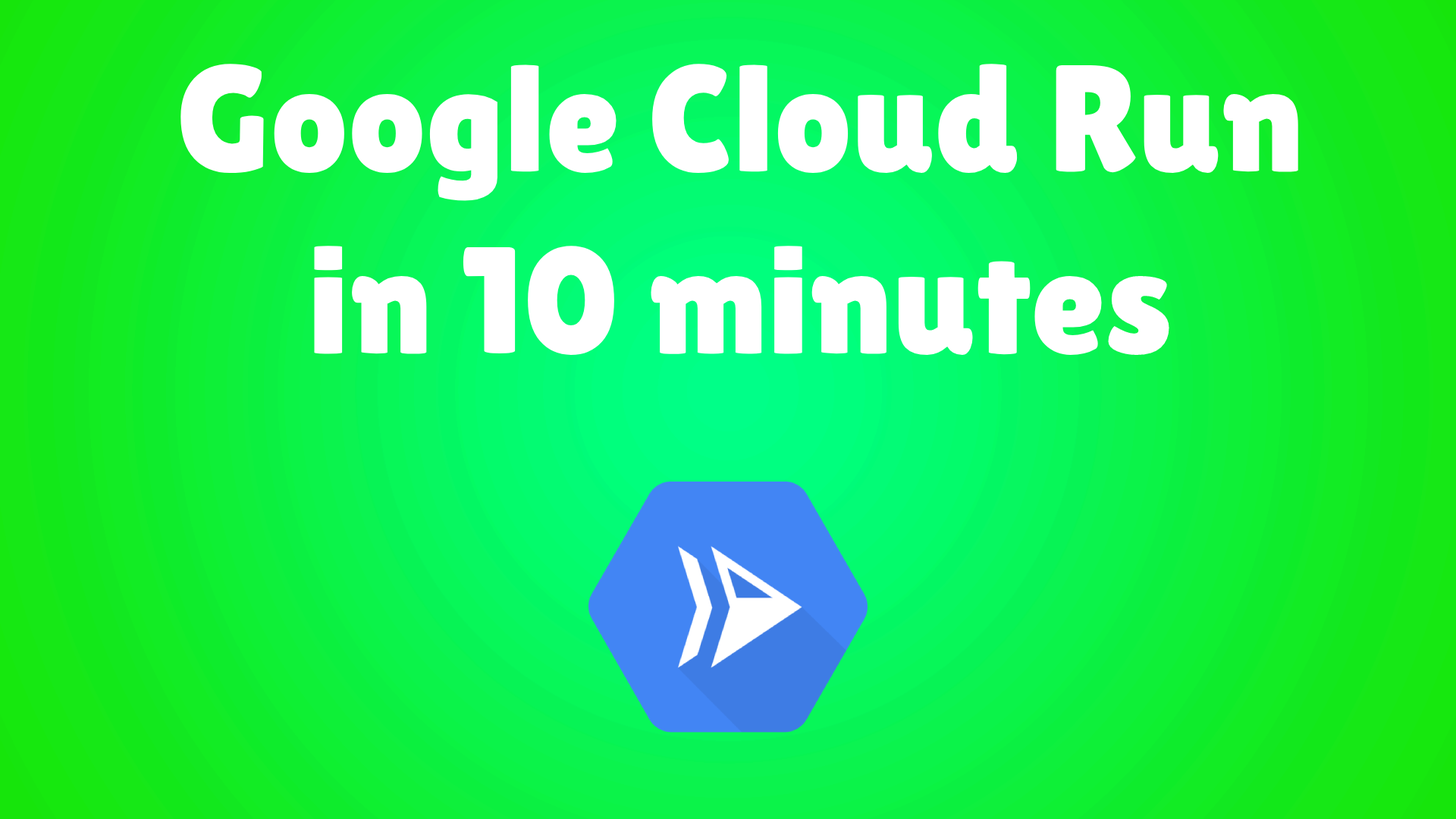
<style>
.page{position:relative;width:1456px;height:819px}
.page>*{position:absolute;margin:0}
.t1{font:151.7px "LilitaOne";color:#ffffff}
</style>
<div class="page">
<p class="t1" style="left:180px;top:64px;width:1118px;height:291px;text-align:center">Google Cloud Run in 10 minutes</p>
</div>
